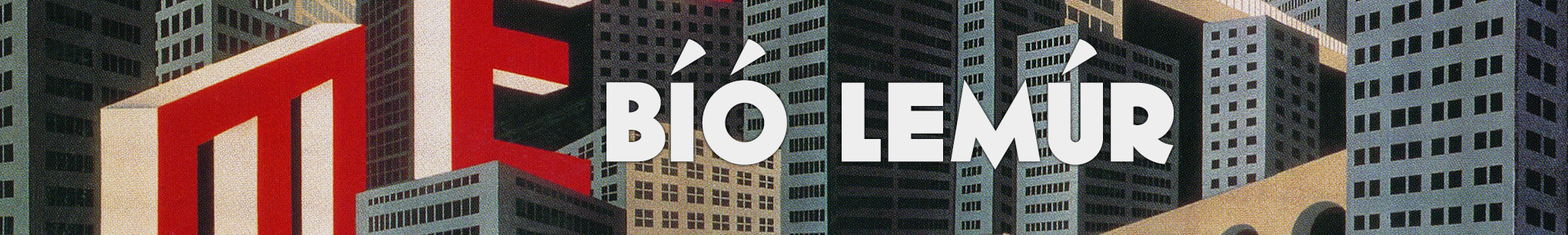
<style>
.page{position:relative;width:1568px;height:235px}
.page>*{position:absolute;margin:0}
.t1{font:111.5px "Geomancy-ExtraBold";color:#eeeeee}
</style>
<div class="page">
<p class="t1" style="left:606px;top:39px;width:568px;height:131px">BÍÓ LEMÚR</p>
</div>
